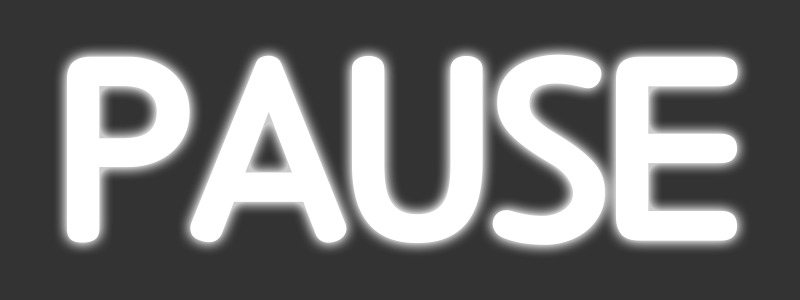
<style>
.page{position:relative;width:800px;height:300px;background:#333333}
.page>*{position:absolute;margin:0}
.t1{font:250px "TTAppgulimR";letter-spacing:-0.05em;color:#ffffff}
</style>
<div class="page">
<p class="t1" style="left:67px;top:54px;width:671px;height:191px">PAUSE</p>
</div>
